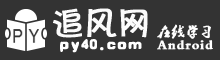
<style>
.page{position:relative;width:220px;height:60px;background:#333333}
.page>*{position:absolute;margin:0}
.t1{font:34.7px "Jkaton";letter-spacing:-0.075em;color:#fbfbfb;font-weight:bold}
.t2{font:13.3px/13.3px "2.0-";letter-spacing:0.05em;color:#ffffff;font-weight:bold}
.t3{font:14.7px "SXSLST";letter-spacing:0.05em;color:#fefefe;font-weight:bold}
</style>
<div class="page">
<p class="t1" style="left:53px;top:8px;width:95px;height:30px">追风网</p>
<p class="t2" style="left:157px;top:24px;width:56px;height:26px">在线学习<br>Android</p>
<p class="t3" style="left:60px;top:39px;width:82px;height:14px">py40.com</p>
</div>
